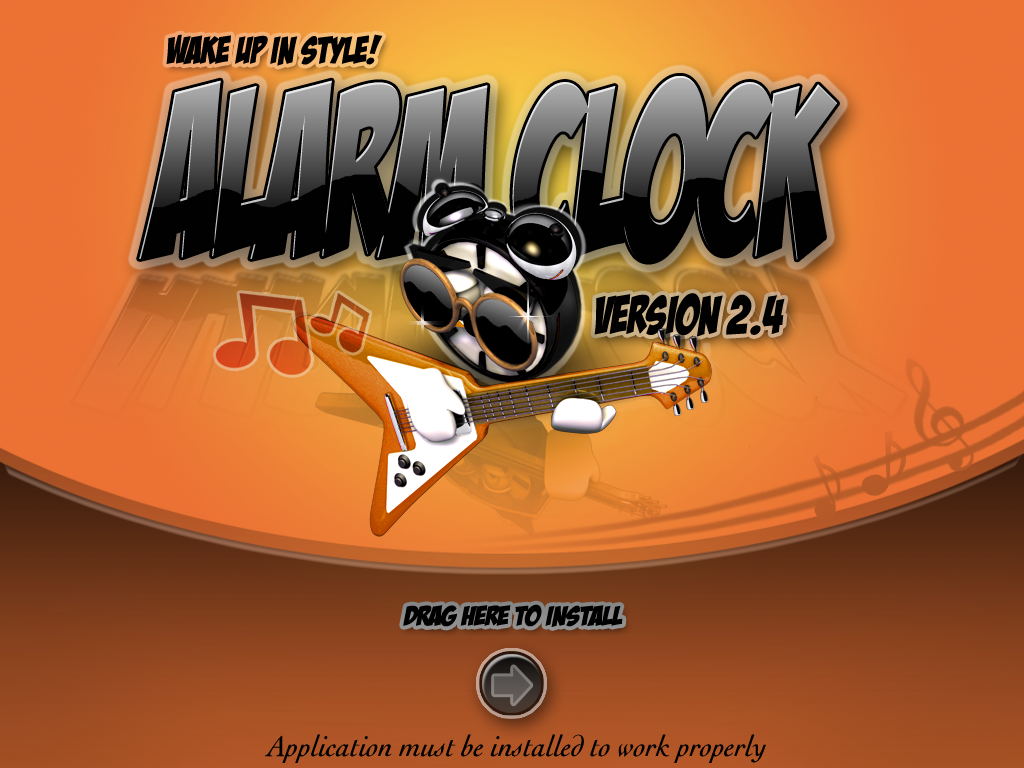
<style>
.page{position:relative;width:1024px;height:768px}
.page>*{position:absolute;margin:0}
.t1{font:37.7px "BadaBoomBB";color:#010101;scale:0.94 1}
.t2{font:53.1px "BadaBoomBB";color:#010101;scale:0.86 1}
.t3{font:27.2px "BadaBoomBB";color:#010101;scale:1.12 1}
.t4{font:29.9px "Cochin-Italic";color:#010101}
</style>
<div class="page">
<p class="t1" style="left:166px;top:34px;width:217px;height:32px">wake up in style!</p>
<p class="t2" style="left:594px;top:293px;width:191px;height:44px">version 2.4</p>
<p class="t3" style="left:403px;top:604px;width:220px;height:23px">Drag here to install</p>
<p class="t4" style="left:265px;top:734px;width:501px;height:29px">Application must be installed to work properly</p>
</div>
